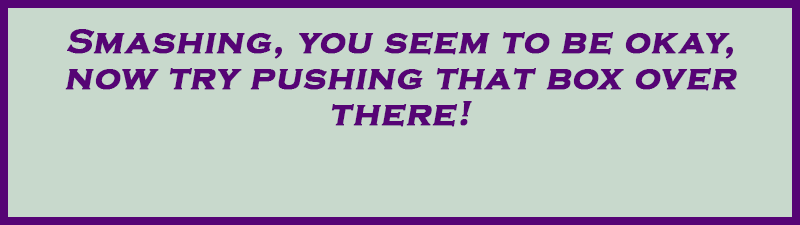
<style>
.page{position:relative;width:800px;height:225px;background:#c8d9cc}
.page>*{position:absolute;margin:0}
.t1{font:36px/36px "CopperplateGothic-Bold";letter-spacing:0.025em;color:#560475;font-weight:bold;font-style:italic}
.t2{font:36px/120px "CopperplateGothic-Bold";letter-spacing:0.025em;color:#560475;font-weight:bold;font-style:italic}
</style>
<div class="page">
<p class="t1" style="left:65px;top:29px;width:672px;height:98px;text-align:center"><span class="t2">Smashing, you seem to be okay,</span> now try pushing that box over there!</p>
</div>
